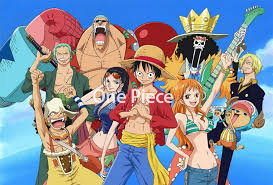
<style>
.page{position:relative;width:273px;height:185px}
.page>*{position:absolute;margin:0}
.t1{font:18px "AdobeFanHeitiStd-Bold"}
</style>
<div class="page">
<p class="t1" style="left:93px;top:89px;width:80px;height:14px">One Piece</p>
</div>
